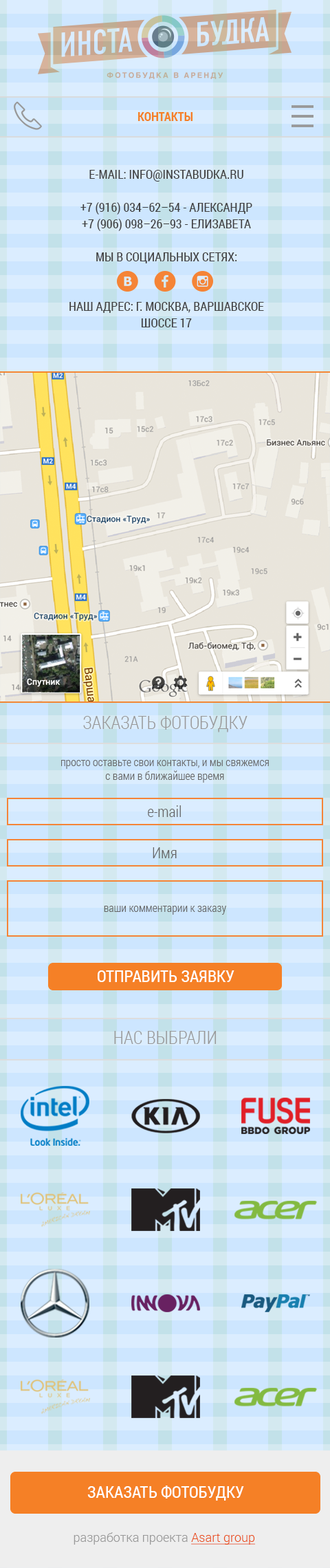
<style>
.page{position:relative;width:330px;height:1568px}
.page>*{position:absolute;margin:0}
.t1{font:12.4px "RobotoCondensed-Bold";color:#f58026;text-transform:uppercase}
.t2{font:12.4px/16.5px "RobotoCondensed-Regular";color:#414141;text-transform:uppercase}
.t3{font:17.9px "RobotoCondensed-Light";color:#999999;text-transform:uppercase}
.t4{font:11px "RobotoCondensed-Light";color:#666666}
.t5{font:15.1px "RobotoCondensed-Light";color:#666666}
.t6{font:16.5px "RobotoCondensed-Regular";color:#ffffff;text-transform:uppercase}
.t7{font:12.4px "Roboto-Light";color:#999999}
.t8{font:12.4px "Roboto-Light";color:#e94e1b;text-decoration:underline}
</style>
<div class="page">
<p class="t1" style="left:138px;top:112px;width:55px;height:9px">контакты</p>
<p class="t2" style="left:69px;top:170px;width:195px;height:157px;text-align:center">E-mail: info@instabudka.ru<br><br>+7 (916) 034–62–54 - Александр<br>+7 (906) 098–26–93 - Елизавета<br><br>Мы в социальных сетях: <br><br><br>Наш адрес: г. Москва, Варшавское шоссе 17</p>
<p class="t3" style="left:83px;top:716px;width:165px;height:16px">заказать фотобудку</p>
<p class="t4" style="left:61px;top:760px;width:208px;height:23px;text-align:center">просто оставьте свои контакты, и мы свяжемся с вами в ближайшее время</p>
<p class="t5" style="left:148px;top:805px;width:33px;height:12px">e-mail</p>
<p class="t5" style="left:153px;top:847px;width:24px;height:11px">Имя</p>
<p class="t4" style="left:104px;top:906px;width:122px;height:9px">ваши комментарии к заказу</p>
<p class="t6" style="left:98px;top:970px;width:137px;height:12px">отправить заявку</p>
<p class="t3" style="left:114px;top:1031px;width:103px;height:13px">нас выбрали</p>
<p class="t6" style="left:87px;top:1485px;width:157px;height:16px">заказать фотобудку</p>
<p class="t7" style="left:74px;top:1532px;width:182px;height:13px">разработка проекта <span class="t8">Asart group</span></p>
</div>
